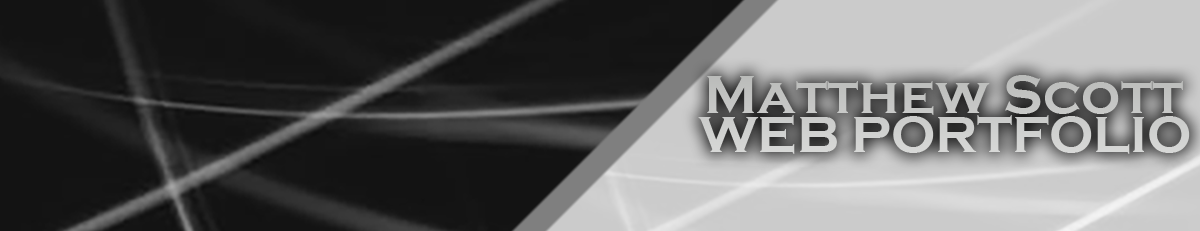
<style>
.page{position:relative;width:1200px;height:231px}
.page>*{position:absolute;margin:0}
.t1{font:13.3px "CopperplateGothic-Bold";color:#c2c3c1}
.t2{font:12.4px "CopperplateGothic-Bold";color:#d0d1d0}
</style>
<div class="page">
<p class="t1" style="left:707px;top:75px;width:476px;height:40px">Matthew Scott</p>
<p class="t2" style="left:698px;top:115px;width:492px;height:39px">WEB PORTFOLIO</p>
</div>
